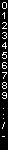
<style>
.page{position:relative;width:8px;height:150px;background:#000000}
.page>*{position:absolute;margin:0}
.t1{font:10px/10px "DokChampa";color:#ffffff}
</style>
<div class="page">
<p class="t1" style="left:2px;top:2px;width:5px;height:135px">0<br>1<br>2<br>3<br>4<br>5<br>6<br>7<br>8<br>9<br>.<br>:<br>/<br>-</p>
</div>
